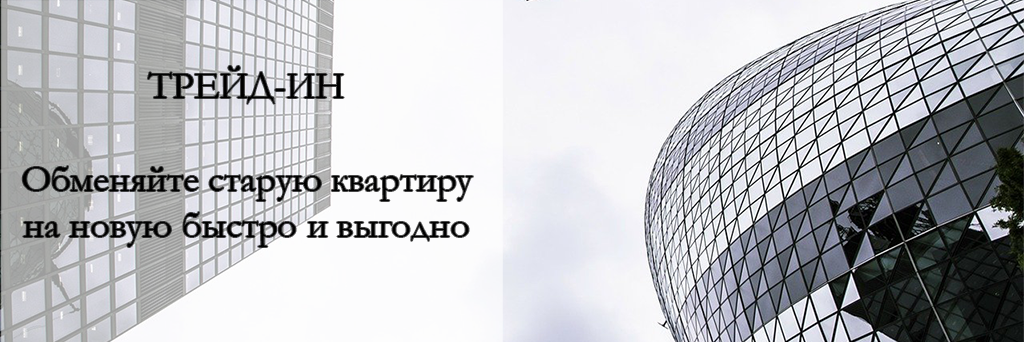
<style>
.page{position:relative;width:1024px;height:342px}
.page>*{position:absolute;margin:0}
.t1{font:38.5px "Garamond";color:#000000}
</style>
<div class="page">
<p class="t1" style="left:22px;top:66px;width:451px;height:181px;text-align:center">ТРЕЙД-ИН<br><br>Обменяйте старую квартиру<br>на новую быстро и выгодно</p>
</div>
